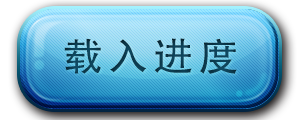
<style>
.page{position:relative;width:300px;height:120px}
.page>*{position:absolute;margin:0}
.t1{font:38.7px "AdobeHeitiStd-Regular";letter-spacing:0.105em;color:#0c3d51;text-transform:uppercase;scale:1.06 1}
</style>
<div class="page">
<p class="t1" style="left:64px;top:38px;width:173px;height:36px">载入进度</p>
</div>
